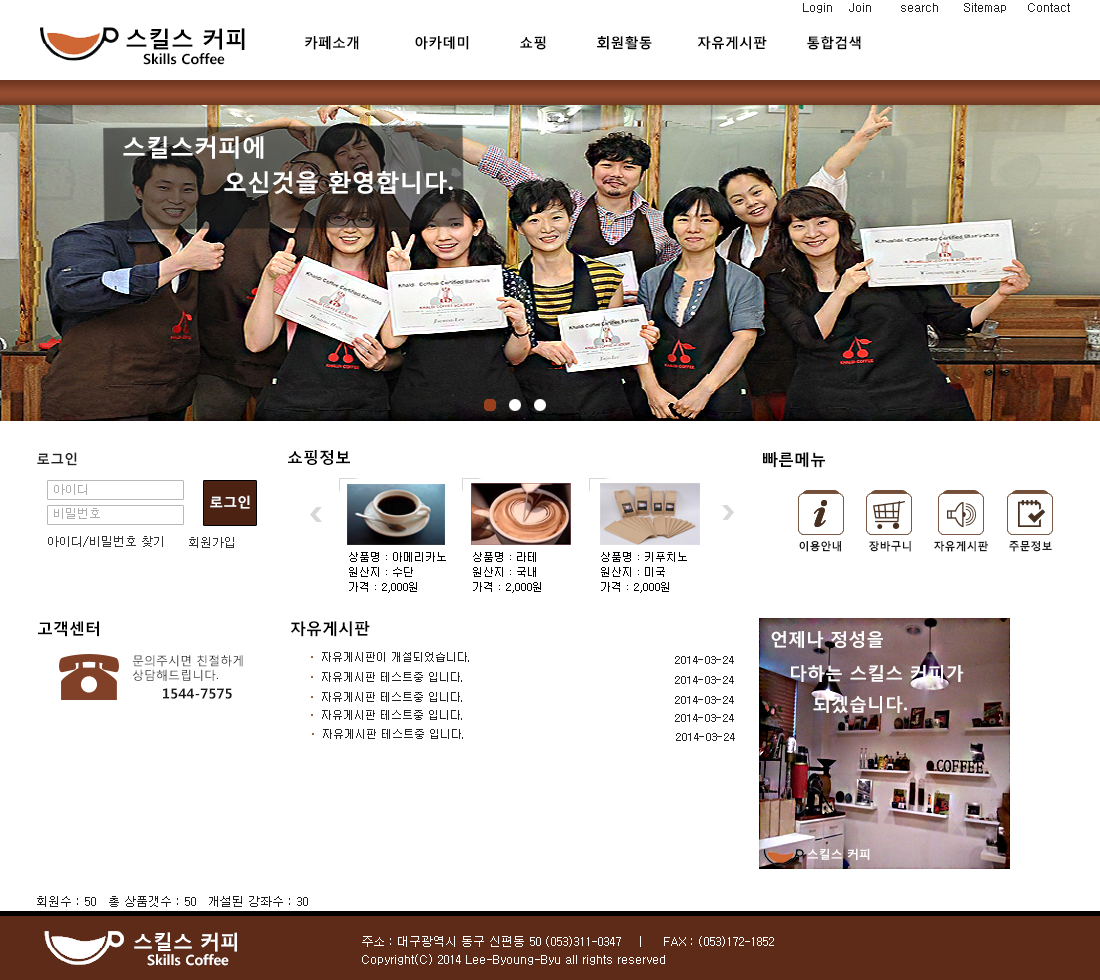
<style>
.page{position:relative;width:1100px;height:980px;background:#ffffff}
.page>*{position:absolute;margin:0}
.t1{font:12px "Dotum";color:#222222}
.t2{font:23px "MalgunGothicBold";color:#000000}
.t3{font:14px "MalgunGothicBold";color:#000000}
.t4{font:24px "MalgunGothicBold";color:#ffffff}
.t5{font:14px "MalgunGothicBold";color:#222222}
.t6{font:16px "MalgunGothicBold";color:#000000}
.t7{font:12px "Dotum";color:#aeaeae}
.t8{font:14px "MalgunGothicBold";color:#ffffff}
.t9{font:12px "Dotum";color:#333333}
.t10{font:11px "MalgunGothicBold";color:#181818}
.t11{font:11px "Dotum";color:#000000}
.t12{font:18px "MalgunGothicBold";color:#ffffff}
.t13{font:11px "Dotum";color:#222222}
.t14{font:12px "MalgunGothicRegular";color:#181818}
.t15{font:14px "MalgunGothicBold";color:#181818}
.t16{font:12px "MalgunGothicBold";color:#ffffff}
.t17{font:12px "Dotum";color:#1d1d1d}
.t18{font:20px "MalgunGothicBold";color:#ffffff}
.t19{font:12px/18px "Dotum";color:#ffffff}
</style>
<div class="page">
<p class="t1" style="left:803px;top:3px;width:267px;height:10px">Login    Join       search      Sitemap     Contact</p>
<p class="t2" style="left:126px;top:28px;width:119px;height:22px">스킬스 커피</p>
<p class="t3" style="left:305px;top:36px;width:556px;height:14px">카페소개           아카데미          쇼핑          회원활동         자유게시판        통합검색</p>
<p class="t3" style="left:143px;top:53px;width:82px;height:12px">Skills Coffee</p>
<p class="t4" style="left:123px;top:136px;width:141px;height:23px">스킬스커피에</p>
<p class="t4" style="left:224px;top:171px;width:229px;height:23px">오신것을 환영합니다.</p>
<p class="t5" style="left:37px;top:452px;width:40px;height:14px">로그인</p>
<p class="t6" style="left:288px;top:450px;width:62px;height:15px">쇼핑정보</p>
<p class="t6" style="left:763px;top:452px;width:62px;height:16px">빠른메뉴</p>
<p class="t7" style="left:54px;top:484px;width:33px;height:11px">아이디</p>
<p class="t8" style="left:210px;top:495px;width:40px;height:14px">로그인</p>
<p class="t7" style="left:54px;top:508px;width:46px;height:11px">비밀번호</p>
<p class="t9" style="left:48px;top:536px;width:115px;height:11px">아이디/비밀번호 찾기</p>
<p class="t9" style="left:189px;top:537px;width:45px;height:11px">회원가입</p>
<p class="t10" style="left:799px;top:541px;width:42px;height:11px">이용안내</p>
<p class="t10" style="left:869px;top:541px;width:42px;height:11px">장바구니</p>
<p class="t10" style="left:934px;top:541px;width:54px;height:11px">자유게시판</p>
<p class="t10" style="left:1009px;top:541px;width:43px;height:11px">주문정보</p>
<p class="t11" style="left:349px;top:552px;width:97px;height:10px">상품명 : 아메리카노</p>
<p class="t11" style="left:473px;top:552px;width:63px;height:10px">상품명 : 라테</p>
<p class="t11" style="left:601px;top:552px;width:86px;height:10px">상품명 : 키푸치노</p>
<p class="t11" style="left:349px;top:567px;width:64px;height:10px">원산지 : 수단</p>
<p class="t11" style="left:473px;top:567px;width:63px;height:10px">원산지 : 국내</p>
<p class="t11" style="left:601px;top:567px;width:64px;height:10px">원산지 : 미국</p>
<p class="t11" style="left:349px;top:582px;width:68px;height:11px">가격 : 2,000원</p>
<p class="t11" style="left:473px;top:582px;width:68px;height:11px">가격 : 2,000원</p>
<p class="t11" style="left:601px;top:582px;width:68px;height:11px">가격 : 2,000원</p>
<p class="t6" style="left:38px;top:621px;width:61px;height:16px">고객센터</p>
<p class="t6" style="left:291px;top:621px;width:79px;height:16px">자유게시판</p>
<p class="t12" style="left:771px;top:631px;width:112px;height:17px">언제나 정성을</p>
<p class="t13" style="left:322px;top:652px;width:147px;height:10px">자유게시판이 개설되었습니다.</p>
<p class="t14" style="left:132px;top:655px;width:111px;height:26px">문의주시면 친절하게<br>상담해드립니다.</p>
<p class="t13" style="left:675px;top:656px;width:59px;height:8px">2014-03-24</p>
<p class="t12" style="left:791px;top:665px;width:173px;height:18px">다하는 스킬스 커피가</p>
<p class="t13" style="left:322px;top:672px;width:140px;height:10px">자유게시판 테스트중 입니다.</p>
<p class="t13" style="left:675px;top:676px;width:59px;height:8px">2014-03-24</p>
<p class="t15" style="left:163px;top:688px;width:69px;height:11px">1544-7575</p>
<p class="t13" style="left:322px;top:692px;width:140px;height:10px">자유게시판 테스트중 입니다.</p>
<p class="t13" style="left:675px;top:696px;width:59px;height:8px">2014-03-24</p>
<p class="t12" style="left:813px;top:696px;width:94px;height:18px">되겠습니다.</p>
<p class="t13" style="left:322px;top:710px;width:140px;height:10px">자유게시판 테스트중 입니다.</p>
<p class="t13" style="left:675px;top:714px;width:59px;height:8px">2014-03-24</p>
<p class="t13" style="left:323px;top:729px;width:140px;height:10px">자유게시판 테스트중 입니다.</p>
<p class="t13" style="left:676px;top:733px;width:59px;height:8px">2014-03-24</p>
<p class="t16" style="left:807px;top:848px;width:63px;height:12px">스킬스 커피</p>
<p class="t17" style="left:37px;top:896px;width:271px;height:11px">회원수 : 50   총 상품갯수 : 50   개설된 강좌수 : 30</p>
<p class="t18" style="left:134px;top:932px;width:103px;height:20px">스킬스 커피</p>
<p class="t19" style="left:362px;top:936px;width:412px;height:29px">주소 : 대구광역시 동구 신편동 50 (053)311-0347    |     FAX : (053)172-1852<br>Copyright(C) 2014 Lee-Byoung-Byu all rights reserved</p>
<p class="t8" style="left:147px;top:954px;width:82px;height:12px">Skills Coffee</p>
</div>
